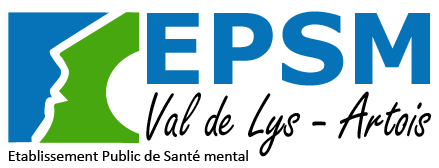
<style>
.page{position:relative;width:439px;height:168px;background:#ffffff}
.page>*{position:absolute;margin:0}
.t1{font:97.8px "Verdana-Bold";color:#0673b8}
.t2{font:69.1px "FreestyleScript-Regular";color:#000000;scale:0.8 1}
.t3{font:15.8px "Calibri";color:#000000}
</style>
<div class="page">
<p class="t1" style="left:147px;top:11px;width:283px;height:75px">EPSM</p>
<p class="t2" style="left:146px;top:91px;width:285px;height:66px">Val de Lys - Artois</p>
<p class="t3" style="left:9px;top:150px;width:239px;height:11px">Etablissement Public de Santé mental</p>
</div>
